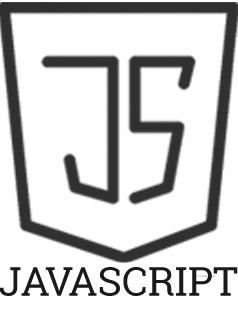
<style>
.page{position:relative;width:238px;height:309px;background:#ffffff}
.page>*{position:absolute;margin:0}
.t1{font:40px "RobotoSlab-Regular";color:#1a1a1a;text-transform:uppercase}
</style>
<div class="page">
<p class="t1" style="left:0px;top:267px;width:238px;height:29px">javascript</p>
</div>
